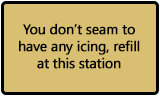
<style>
.page{position:relative;width:160px;height:96px;background:#d8bf71}
.page>*{position:absolute;margin:0}
.t1{font:14px "SegoeUI";letter-spacing:-0.025em;color:#010101;font-weight:bold}
</style>
<div class="page">
<p class="t1" style="left:19px;top:23px;width:121px;height:46px;text-align:center">You don’t seam to have any icing, refill at this station</p>
</div>
